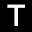
<style>
.page{position:relative;width:32px;height:32px;background:#000000}
.page>*{position:absolute;margin:0}
.t1{font:30px "Raleway-SemiBold";color:#ffffff}
</style>
<div class="page">
<p class="t1" style="left:7px;top:4px;width:18px;height:22px">T</p>
</div>
